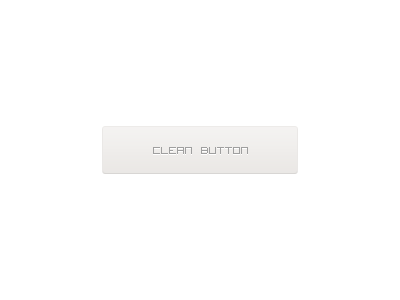
<style>
.page{position:relative;width:400px;height:300px;background:#ffffff}
.page>*{position:absolute;margin:0}
.t1{font:18px "VisitorTT2BRK";color:#9e9e9e}
</style>
<div class="page">
<p class="t1" style="left:153px;top:147px;width:95px;height:7px">Clean Button</p>
</div>
